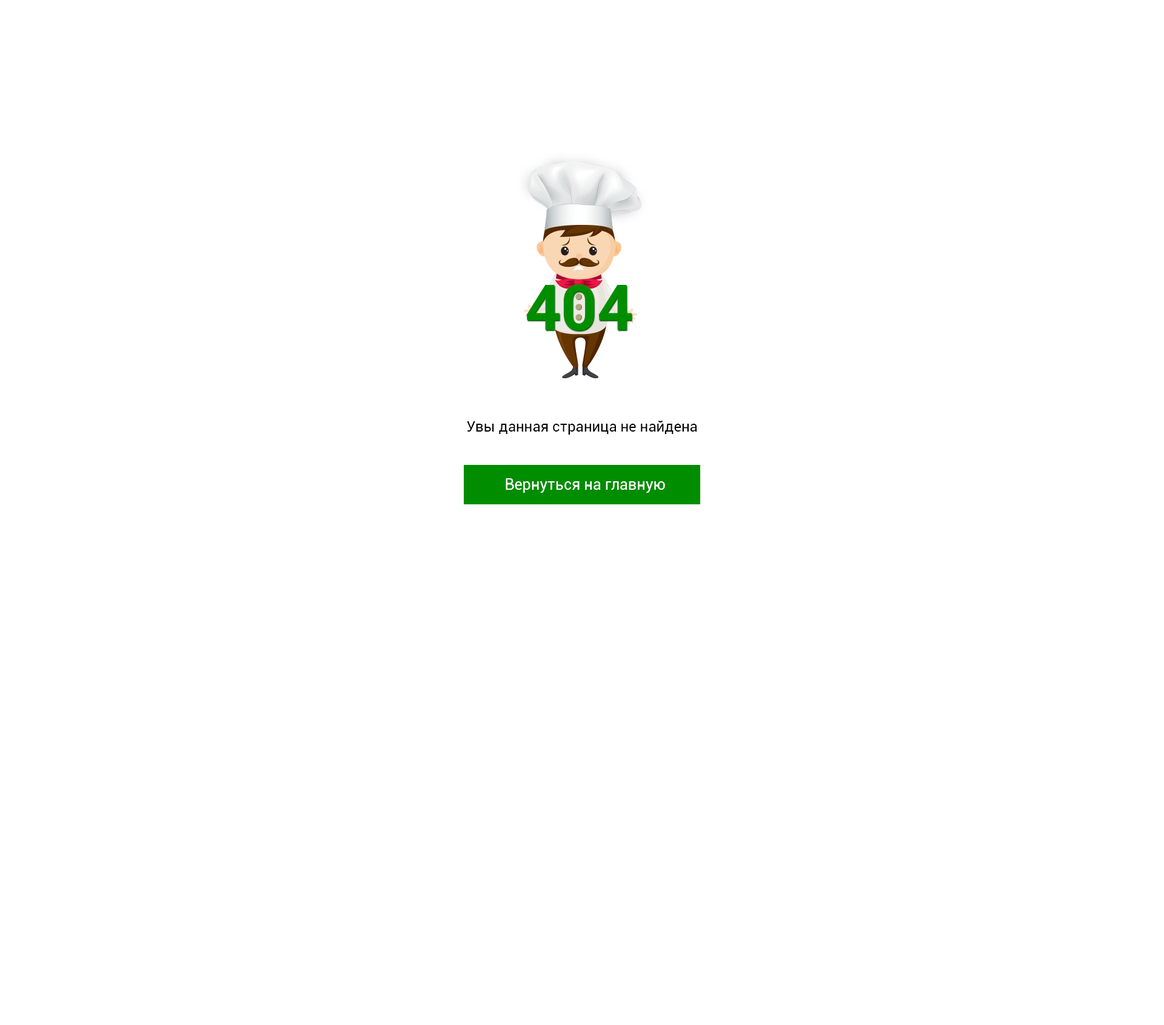
<style>
.page{position:relative;width:1164px;height:1025px;background:#ffffff}
.page>*{position:absolute;margin:0}
.t1{font:14.5px "Roboto-Regular";color:#000000}
.t2{font:15.4px "Roboto-Regular";color:#ffffff}
</style>
<div class="page">
<p class="t1" style="left:467px;top:421px;width:230px;height:14px">Увы данная страница не найдена</p>
<p class="t2" style="left:505px;top:478px;width:160px;height:15px">Вернуться на главную</p>
</div>
